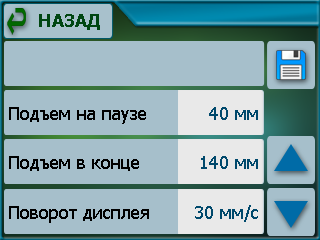
<style>
.page{position:relative;width:320px;height:240px;background:#a6bfcb}
.page>*{position:absolute;margin:0}
.t1{font:18px "Tahoma-Bold";color:#004612}
.t2{font:18px "Tahoma";color:#000000}
.t3{font:18px "Tahoma";color:#00496c}
</style>
<div class="page">
<p class="t1" style="left:39px;top:14px;width:61px;height:16px">НАЗАД</p>
<p class="t2" style="left:9px;top:107px;width:137px;height:17px">Подъем на паузе</p>
<p class="t3" style="left:209px;top:107px;width:49px;height:13px">40 мм</p>
<p class="t2" style="left:9px;top:156px;width:130px;height:15px">Подъем в конце</p>
<p class="t3" style="left:201px;top:156px;width:57px;height:13px">140 мм</p>
<p class="t2" style="left:9px;top:206px;width:140px;height:17px">Поворот дисплея</p>
<p class="t3" style="left:195px;top:205px;width:63px;height:17px">30 мм/с</p>
</div>
